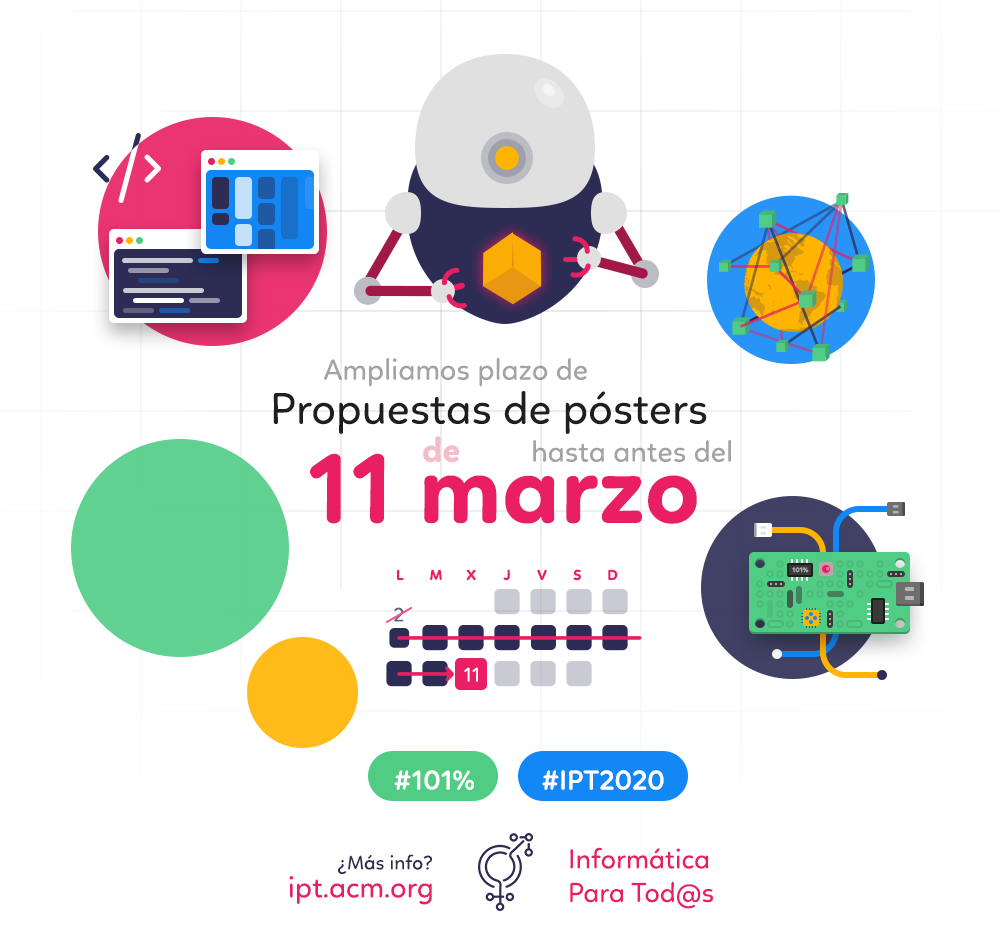
<style>
.page{position:relative;width:1000px;height:950px;background:#ffffff}
.page>*{position:absolute;margin:0}
.t1{font:30px "Linotte-Regular";color:#a3a3a3}
.t2{font:45px "Linotte-Regular";color:#1f1f1f}
.t3{font:35px "Linotte-Bold";color:#f6bcca}
.t4{font:101px "Linotte-Bold";color:#e91e63}
.t5{font:15px "Linotte-Bold";color:#e91e63}
.t6{font:7px "Linotte-Bold";color:#afafaf;text-transform:uppercase}
.t7{font:20px "Linotte-Regular";color:#61617f}
.t8{font:20px "Linotte-Regular";color:#ffffff}
.t9{font:28px "Linotte-SemiBold";color:#ffffff}
.t10{font:20px "Linotte-Regular";color:#2c2c54}
.t11{font:28px "Linotte-Regular";color:#e91e63}
.t12{font:30px "Linotte-Regular";color:#e91e63}
</style>
<div class="page">
<p class="t1" style="left:324px;top:357px;width:263px;height:30px">Ampliamos plazo de</p>
<p class="t2" style="left:273px;top:391px;width:434px;height:43px">Propuestas de pósters</p>
<p class="t3" style="left:423px;top:436px;width:37px;height:27px">de</p>
<p class="t1" style="left:533px;top:439px;width:198px;height:23px">hasta antes del</p>
<p class="t4" style="left:310px;top:453px;width:387px;height:71px">11 marzo</p>
<p class="t5" style="left:397px;top:569px;width:7px;height:12px">L</p>
<p class="t5" style="left:430px;top:569px;width:12px;height:12px">M</p>
<p class="t5" style="left:466px;top:569px;width:10px;height:12px">X</p>
<p class="t5" style="left:503px;top:569px;width:7px;height:12px">J</p>
<p class="t5" style="left:537px;top:569px;width:10px;height:12px">V</p>
<p class="t5" style="left:573px;top:569px;width:9px;height:12px">S</p>
<p class="t5" style="left:608px;top:569px;width:10px;height:11px">D</p>
<p class="t6" style="left:792px;top:567px;width:17px;height:6px">101%</p>
<p class="t7" style="left:394px;top:607px;width:10px;height:15px">2</p>
<p class="t8" style="left:464px;top:667px;width:14px;height:15px">11</p>
<p class="t9" style="left:394px;top:770px;width:80px;height:20px">#101%</p>
<p class="t9" style="left:542px;top:770px;width:122px;height:20px">#IPT2020</p>
<p class="t10" style="left:338px;top:854px;width:94px;height:20px">¿Más info?</p>
<p class="t11" style="left:570px;top:847px;width:143px;height:62px;text-align:right">Informática<br>Para Tod@s</p>
<p class="t12" style="left:289px;top:876px;width:143px;height:29px">ipt.acm.org</p>
</div>
